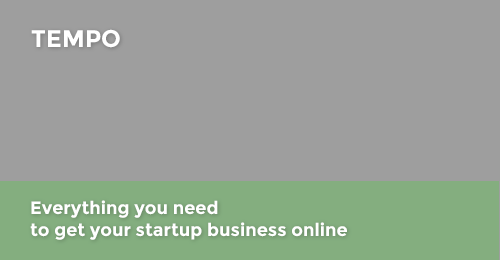
<style>
.page{position:relative;width:500px;height:260px;background:#9e9e9e}
.page>*{position:absolute;margin:0}
.t1{font:24px "Montserrat-Bold";color:#ffffff}
.t2{font:18px "Montserrat-Bold";color:#ffffff}
</style>
<div class="page">
<p class="t1" style="left:31px;top:29px;width:89px;height:19px">TEMPO</p>
<p class="t2" style="left:30px;top:200px;width:317px;height:40px">Everything you need<br>to get your startup business online</p>
</div>
